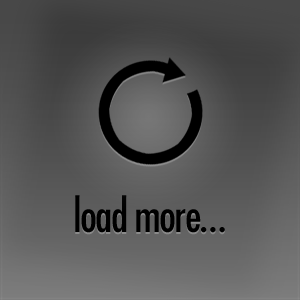
<style>
.page{position:relative;width:300px;height:300px}
.page>*{position:absolute;margin:0}
.t1{font:44.2px "Futura-CondensedMedium";letter-spacing:-0.04em;color:#000000}
</style>
<div class="page">
<p class="t1" style="left:75px;top:195px;width:150px;height:38px">load more…</p>
</div>
